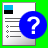
<style>
.page{position:relative;width:48px;height:48px;background:#00ff00}
.page>*{position:absolute;margin:0}
.t1{font:24px "Arial-BoldMT";color:#ffffff}
</style>
<div class="page">
<p class="t1" style="left:27px;top:16px;width:13px;height:18px">?</p>
</div>
